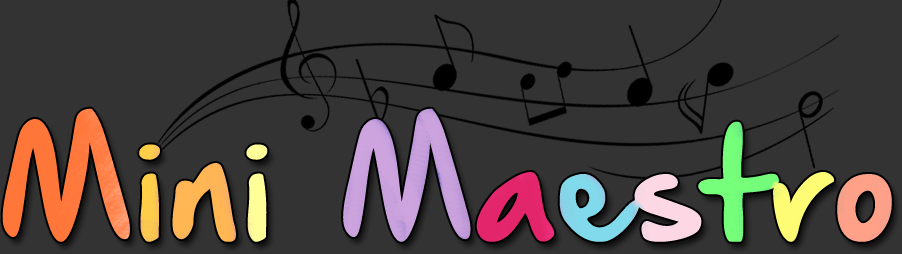
<style>
.page{position:relative;width:902px;height:254px;background:#333333}
.page>*{position:absolute;margin:0}
.t1{font:130px "HandOfSeanDemo"}
</style>
<div class="page">
<p class="t1" style="left:2px;top:108px;width:890px;height:134px">Mini Maestro</p>
</div>
